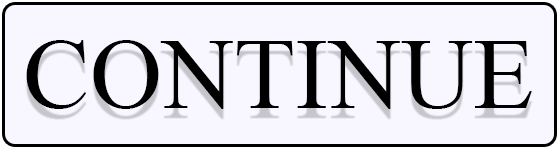
<style>
.page{position:relative;width:559px;height:149px;background:#f8f6fe}
.page>*{position:absolute;margin:0}
.t1{font:100px "TimesNewRomanPSMT";color:#000000}
</style>
<div class="page">
<p class="t1" style="left:26px;top:40px;width:506px;height:69px">CONTINUE</p>
</div>
